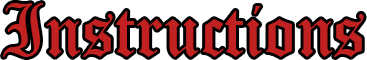
<style>
.page{position:relative;width:367px;height:60px;background:#ffffff}
.page>*{position:absolute;margin:0}
.t1{font:72px "OldEnglishTextMT";color:#c22121}
</style>
<div class="page">
<p class="t1" style="left:3px;top:3px;width:361px;height:54px">Instructions</p>
</div>
